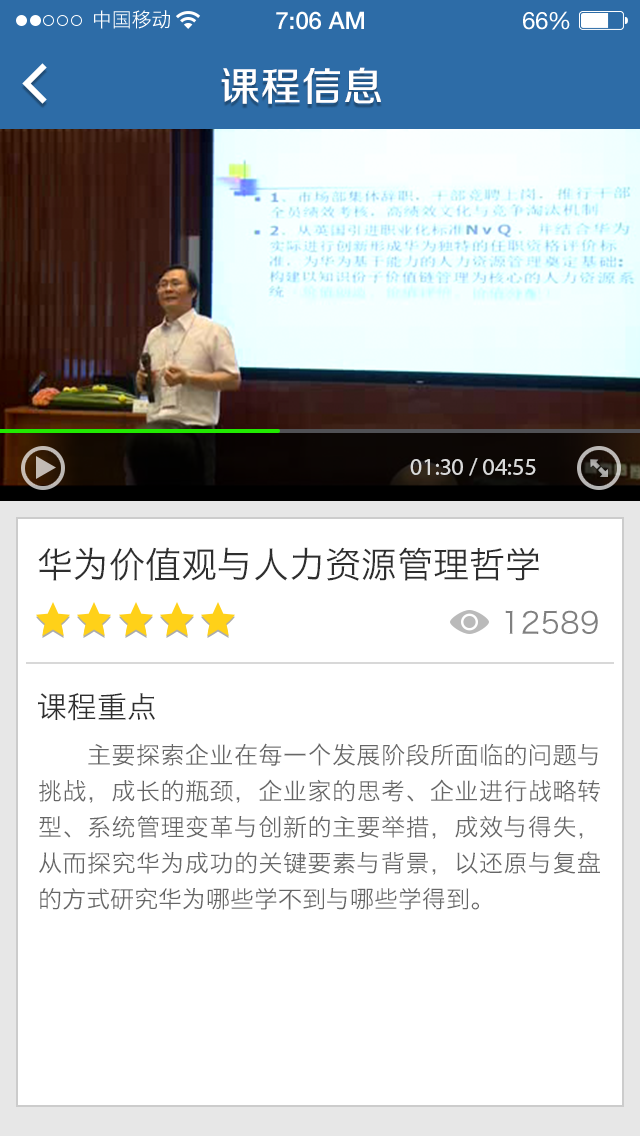
<style>
.page{position:relative;width:640px;height:1136px;background:#ffffff}
.page>*{position:absolute;margin:0}
.t1{font:20px "HiraginoSansGB-W3";color:#ffffff}
.t2{font:24px "HelveticaNeue-Medium";color:#ffffff}
.t3{font:24px "HelveticaNeue";color:#ffffff}
.t4{font:24px "HelveticaNeue";letter-spacing:-0.02em;color:#ffffff}
.t5{font:40px "FZZZHUNHJW--GB1-0";letter-spacing:0.025em;color:#ffffff}
.t6{font:24px "MyriadPro-Regular";color:#dadada}
.t7{font:36px "HiraginoSansGB-W3";color:#2e2e2e}
.t8{font:30px "HiraginoSansGB-W3";color:#808080}
.t9{font:30px "HiraginoSansGB-W3";color:#2e2e2e}
.t10{font:24px/36px "HiraginoSansGB-W3";color:#666666}
</style>
<div class="page">
<p class="t1" style="left:94px;top:10px;width:76px;height:19px">中国移动</p>
<p class="t2" style="left:276px;top:11px;width:88px;height:19px">7:06 AM</p>
<p class="t3" style="left:523px;top:11px;width:47px;height:19px">6<span class="t4">6</span>%</p>
<p class="t5" style="left:221px;top:67px;width:160px;height:37px">课程信息</p>
<p class="t6" style="left:410px;top:458px;width:126px;height:18px">01:30 / 04:55</p>
<p class="t7" style="left:38px;top:547px;width:501px;height:34px">华为价值观与人力资源管理哲学</p>
<p class="t8" style="left:505px;top:610px;width:93px;height:24px">12589</p>
<p class="t9" style="left:38px;top:693px;width:117px;height:28px">课程重点</p>
<p class="t10" style="left:39px;top:743px;width:562px;height:167px;text-align:justify">主要探索企业在每一个发展阶段所面临的问题与挑战，成长的瓶颈，企业家的思考、企业进行战略转型、系统管理变革与创新的主要举措，成效与得失，从而探究华为成功的关键要素与背景，以还原与复盘的方式研究华为哪些学不到与哪些学得到。</p>
</div>
